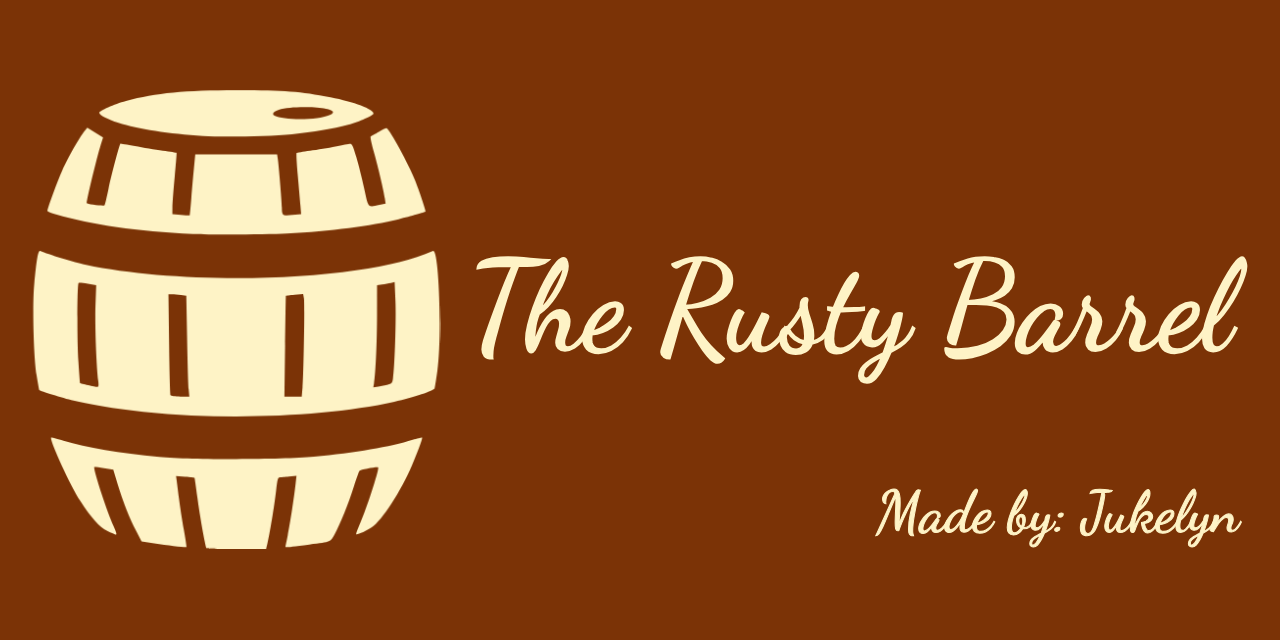
<style>
.page{position:relative;width:1280px;height:640px;background:#7b3306}
.page>*{position:absolute;margin:0}
.t1{font:125.3px "DancingScript-Regular";color:#fef3c6}
.t2{font:57.9px "DancingScript-Medium";color:#fef3c6}
</style>
<div class="page">
<p class="t1" style="left:476px;top:256px;width:772px;height:128px">The Rusty Barrel</p>
<p class="t2" style="left:874px;top:488px;width:369px;height:60px">Made by: Jukelyn</p>
</div>
